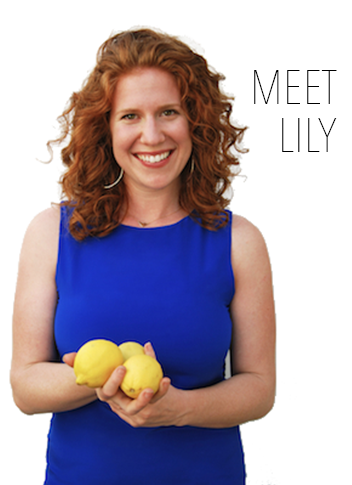
<style>
.page{position:relative;width:352px;height:485px;background:#ffffff}
.page>*{position:absolute;margin:0}
.t1{font:48px/48px "AvenirNextCondensed-UltraLight";letter-spacing:0.01em;color:#000000;font-variant:small-caps}
</style>
<div class="page">
<p class="t1" style="left:254px;top:70px;width:83px;height:82px;text-align:right">MEET<br>LILY</p>
</div>
